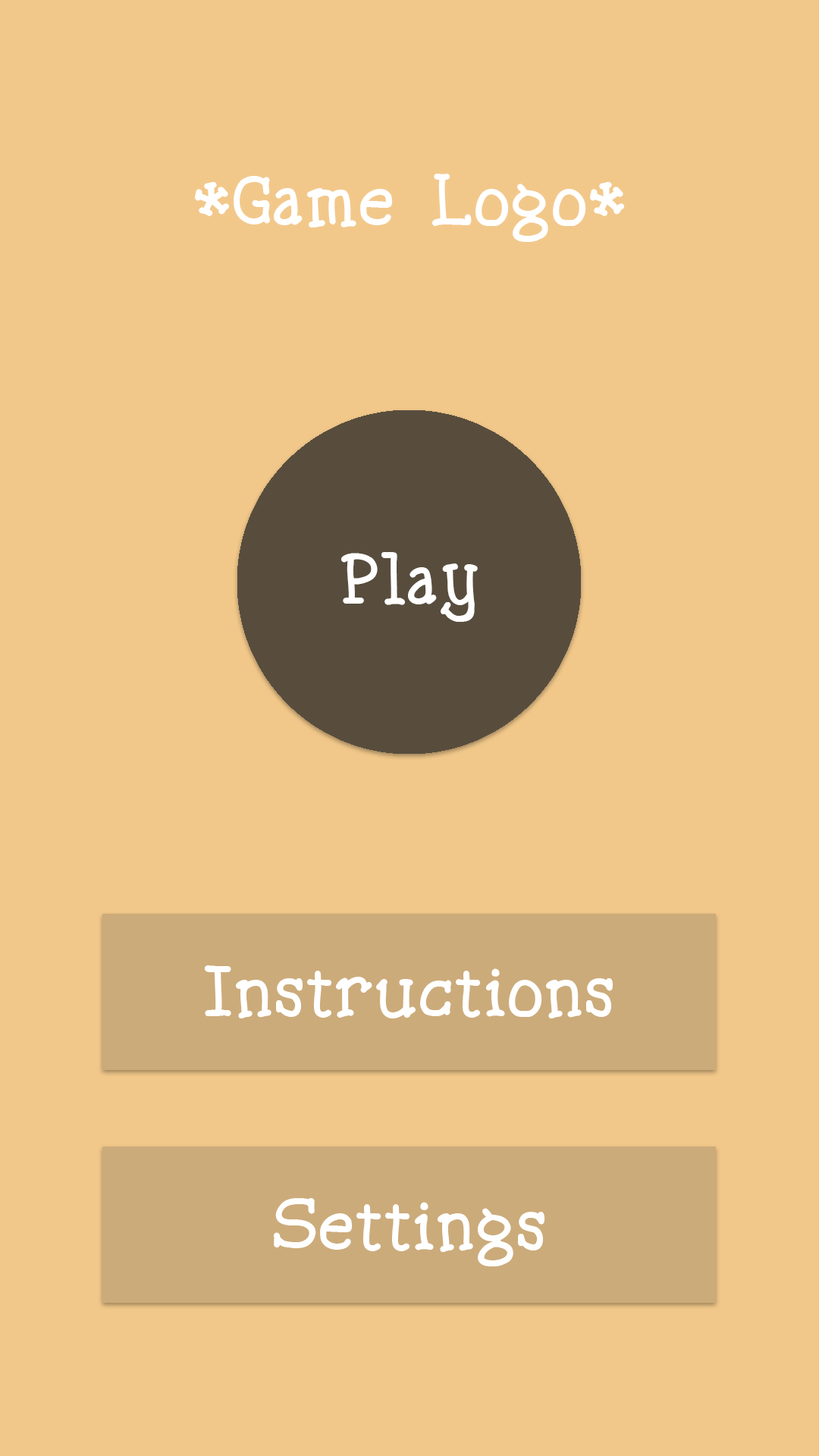
<style>
.page{position:relative;width:819px;height:1456px;background:#f2c88a}
.page>*{position:absolute;margin:0}
.t1{font:75.8px "Spellstone";color:#ffffff}
</style>
<div class="page">
<p class="t1" style="left:195px;top:174px;width:429px;height:68px">*Game Logo*</p>
<p class="t1" style="left:341px;top:552px;width:137px;height:70px">Play</p>
<p class="t1" style="left:204px;top:965px;width:409px;height:53px">Instructions</p>
<p class="t1" style="left:274px;top:1198px;width:270px;height:68px">Settings</p>
</div>
